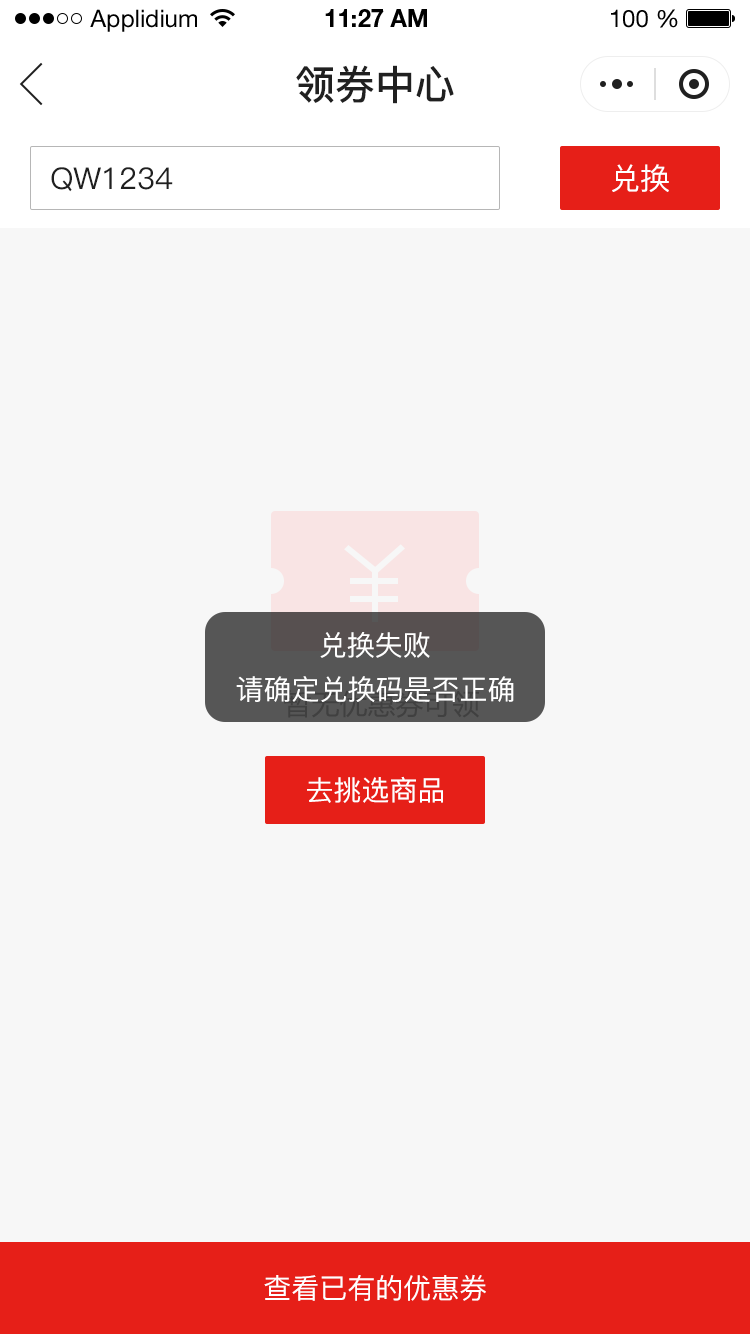
<style>
.page{position:relative;width:750px;height:1334px;background:#f7f7f7}
.page>*{position:absolute;margin:0}
.t1{font:24px "HelveticaNeueLTStd-Roman";color:#000000}
.t2{font:24px "HelveticaNeueLTStd-Bd";color:#000000}
.t3{font:40px "PingFang-SC-Bold";color:#202020;text-transform:uppercase}
.t4{font:30px "PingFang-SC-Medium";color:#202020;text-transform:uppercase}
.t5{font:30px "PingFang-SC-Medium";color:#ffffff;text-transform:uppercase}
.t6{font:28px "PingFang-SC-Medium";color:#ffffff;text-transform:uppercase}
</style>
<div class="page">
<p class="t1" style="left:90px;top:9px;width:107px;height:23px">Applidium</p>
<p class="t2" style="left:325px;top:9px;width:102px;height:18px">11:27 AM</p>
<p class="t1" style="left:611px;top:9px;width:67px;height:19px">100 %</p>
<p class="t3" style="left:296px;top:65px;width:158px;height:39px">领券中心</p>
<p class="t4" style="left:51px;top:167px;width:122px;height:25px">qw1234</p>
<p class="t5" style="left:612px;top:164px;width:57px;height:28px">兑换</p>
<p class="t6" style="left:320px;top:632px;width:110px;height:26px">兑换失败</p>
<p class="t6" style="left:236px;top:676px;width:278px;height:26px">请确定兑换码是否正确</p>
<p class="t6" style="left:307px;top:776px;width:136px;height:27px">去挑选商品</p>
<p class="t6" style="left:264px;top:1274px;width:222px;height:27px">查看已有的优惠券</p>
</div>
